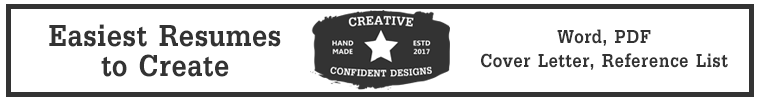
<style>
.page{position:relative;width:760px;height:100px;background:#ffffff}
.page>*{position:absolute;margin:0}
.t1{font:48px/30px "DilleniaUPCBold";letter-spacing:0.01em;color:#333333}
.t2{font:30px/24px "DilleniaUPCBold";letter-spacing:0.01em;color:#333333}
</style>
<div class="page">
<p class="t1" style="left:49px;top:24px;width:232px;height:53px;text-align:center">Easiest Resumes<br>to Create</p>
<p class="t2" style="left:481px;top:29px;width:247px;height:41px;text-align:center">Word, PDF<br>Cover Letter, Reference List</p>
</div>
